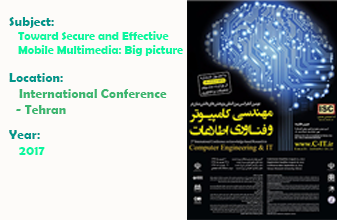
<style>
.page{position:relative;width:337px;height:220px;background:#fdfbf9}
.page>*{position:absolute;margin:0}
.t1{font:12px "BerlinSansFBDemi-Bold";color:#09f7a0}
.t2{font:13.3px "BerlinSansFBDemi-Bold";color:#02968b}
.t3{font:13.3px "BerlinSansFBDemi-Bold";color:#3cb670}
.t4{font:13.3px "BerlinSansFBDemi-Bold";color:#09f7a0}
</style>
<div class="page">
<p class="t1" style="left:9px;top:17px;width:174px;height:39px"><span class="t2">Subject: <br></span>   Toward Secure and Effective <br>   Mobile Multimedia: Big picture</p>
<p class="t3" style="left:9px;top:73px;width:158px;height:41px"><span class="t2">Location:<br>  </span> International Conference <br>  - Tehran</p>
<p class="t2" style="left:9px;top:130px;width:36px;height:25px">Year: <br>   <span class="t4">2017</span></p>
</div>
